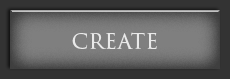
<style>
.page{position:relative;width:230px;height:79px;background:#333333}
.page>*{position:absolute;margin:0}
.t1{font:24px "TrajanPro3-Regular";color:#e9e9e9}
</style>
<div class="page">
<p class="t1" style="left:72px;top:32px;width:85px;height:17px">create</p>
</div>
